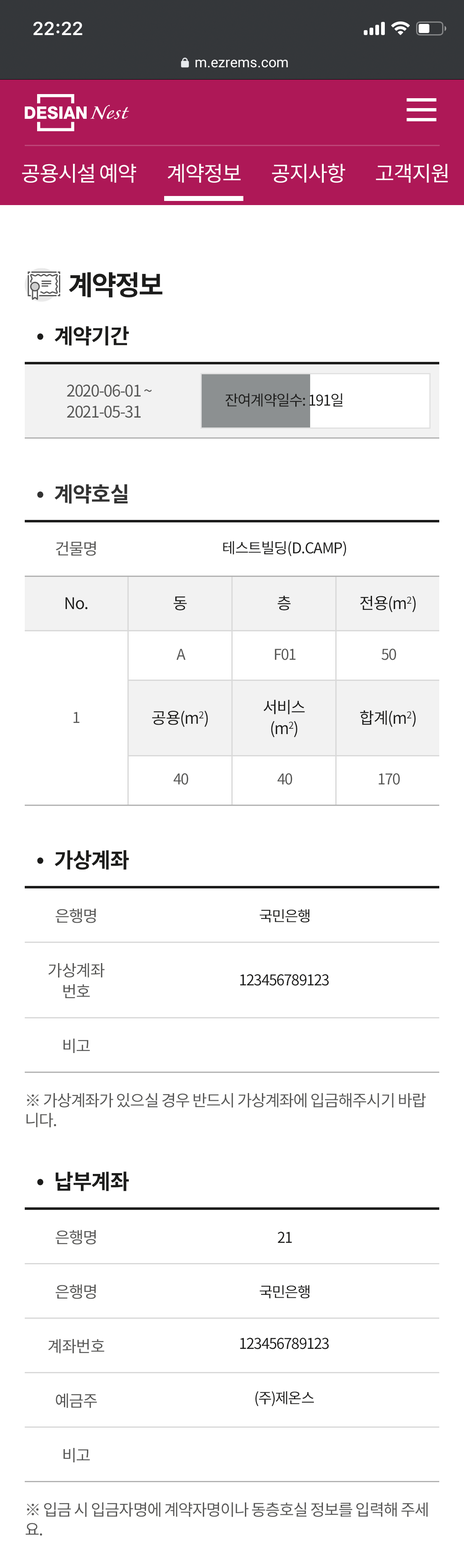
<style>
.page{position:relative;width:464px;height:1568px;background:#ffffff}
.page>*{position:absolute;margin:0}
.t1{font:14px "Roboto-Regular";color:#ffffff}
.t2{font:21px "NotoSansCJKkr-Regular";letter-spacing:-0.04em;color:#ffffff}
.t3{font:27.2px "NotoSansCJKkr-Bold";letter-spacing:-0.06em;color:#1c1c1b}
.t4{font:21px "NotoSansCJKkr-Bold";letter-spacing:-0.035em;color:#1c1c1b}
.t5{font:16.1px/21px "NotoSansCJKkr-Regular";letter-spacing:-0.06em;color:#575756}
.t6{font:14.9px "NotoSansCJKkr-Regular";letter-spacing:-0.05em;color:#1c1c1b}
.t7{font:21px "NotoSansCJKkr-Bold";letter-spacing:-0.035em;color:#333333}
.t8{font:16.1px "NotoSansCJKkr-Regular";letter-spacing:-0.04em;color:#575756}
.t9{font:14.9px "NotoSansCJKkr-Regular";letter-spacing:-0.04em;color:#1c1c1b}
.t10{font:16.1px "NotoSansCJKkr-Regular";letter-spacing:-0.04em;color:#1c1c1b}
.t11{font:14.9px "NotoSansCJKkr-Regular";letter-spacing:-0.05em;color:#575756}
.t12{font:16.1px/21px "NotoSansCJKkr-Regular";letter-spacing:-0.04em;color:#1c1c1b}
.t13{font:14.9px "NotoSansCJKkr-Regular";letter-spacing:-0.04em;color:#575756}
.t14{font:16.1px/21px "NotoSansCJKkr-Regular";letter-spacing:-0.04em;color:#575756}
.t15{font:16.1px/19.8px "NotoSansCJKkr-Regular";letter-spacing:-0.05em;color:#575756}
</style>
<div class="page">
<p class="t1" style="left:196px;top:59px;width:92px;height:9px">m.ezrems.com</p>
<p class="t2" style="left:22px;top:164px;width:114px;height:19px">공용시설 예약</p>
<p class="t2" style="left:168px;top:164px;width:73px;height:19px">계약정보</p>
<p class="t2" style="left:272px;top:163px;width:73px;height:20px">공지사항</p>
<p class="t2" style="left:376px;top:164px;width:72px;height:19px">고객지원</p>
<p class="t3" style="left:69px;top:272px;width:94px;height:26px">계약정보</p>
<p class="t4" style="left:54px;top:326px;width:75px;height:20px">계약기간</p>
<p class="t4" style="left:37px;top:333px;width:6px;height:7px">•</p>
<p class="t5" style="left:67px;top:385px;width:85px;height:33px">2020-06-01 ~<br>2021-05-31</p>
<p class="t6" style="left:225px;top:393px;width:118px;height:14px">잔여계약일수: 191일</p>
<p class="t7" style="left:54px;top:484px;width:74px;height:20px">계약호실</p>
<p class="t7" style="left:37px;top:491px;width:6px;height:7px">•</p>
<p class="t8" style="left:56px;top:541px;width:40px;height:15px">건물명</p>
<p class="t9" style="left:223px;top:541px;width:123px;height:15px">테스트빌딩(D.CAMP)</p>
<p class="t10" style="left:66px;top:597px;width:21px;height:12px">No.</p>
<p class="t10" style="left:174px;top:596px;width:13px;height:14px">동</p>
<p class="t10" style="left:278px;top:595px;width:13px;height:15px">층</p>
<p class="t10" style="left:360px;top:596px;width:56px;height:16px">전용(m2)</p>
<p class="t11" style="left:177px;top:649px;width:9px;height:11px">A</p>
<p class="t11" style="left:275px;top:649px;width:21px;height:11px">F01</p>
<p class="t11" style="left:382px;top:649px;width:15px;height:11px">50</p>
<p class="t12" style="left:264px;top:700px;width:41px;height:37px;text-align:center">서비스<br>(m2)</p>
<p class="t13" style="left:73px;top:712px;width:7px;height:11px">1</p>
<p class="t10" style="left:152px;top:711px;width:56px;height:16px">공용(m2)</p>
<p class="t10" style="left:360px;top:710px;width:56px;height:17px">합계(m2)</p>
<p class="t11" style="left:173px;top:773px;width:16px;height:12px">40</p>
<p class="t11" style="left:277px;top:773px;width:16px;height:12px">40</p>
<p class="t11" style="left:379px;top:773px;width:21px;height:12px">170</p>
<p class="t4" style="left:37px;top:857px;width:6px;height:7px">•</p>
<p class="t4" style="left:54px;top:850px;width:75px;height:20px">가상계좌</p>
<p class="t8" style="left:56px;top:908px;width:40px;height:15px">은행명</p>
<p class="t6" style="left:260px;top:909px;width:50px;height:14px">국민은행</p>
<p class="t14" style="left:48px;top:963px;width:57px;height:35px;text-align:center">가상계좌<br>번호</p>
<p class="t6" style="left:240px;top:974px;width:89px;height:12px">123456789123</p>
<p class="t8" style="left:64px;top:1039px;width:26px;height:14px">비고</p>
<p class="t15" style="left:26px;top:1093px;width:400px;height:34px">※ 가상계좌가 있으실 경우 반드시 가상계좌에 입금해주시기 바랍<br>니다.</p>
<p class="t4" style="left:37px;top:1179px;width:6px;height:6px">•</p>
<p class="t4" style="left:56px;top:1171px;width:73px;height:20px">납부계좌</p>
<p class="t8" style="left:56px;top:1230px;width:40px;height:14px">은행명</p>
<p class="t6" style="left:278px;top:1232px;width:14px;height:11px">21</p>
<p class="t8" style="left:56px;top:1284px;width:40px;height:15px">은행명</p>
<p class="t6" style="left:260px;top:1285px;width:50px;height:14px">국민은행</p>
<p class="t6" style="left:240px;top:1338px;width:89px;height:11px">123456789123</p>
<p class="t8" style="left:48px;top:1339px;width:56px;height:14px">계좌번호</p>
<p class="t8" style="left:56px;top:1393px;width:41px;height:15px">예금주</p>
<p class="t6" style="left:255px;top:1391px;width:59px;height:15px">(주)제온스</p>
<p class="t8" style="left:64px;top:1448px;width:26px;height:14px">비고</p>
<p class="t15" style="left:26px;top:1502px;width:402px;height:34px">※ 입금 시 입금자명에 계약자명이나 동층호실 정보를 입력해 주세<br>요.</p>
</div>
